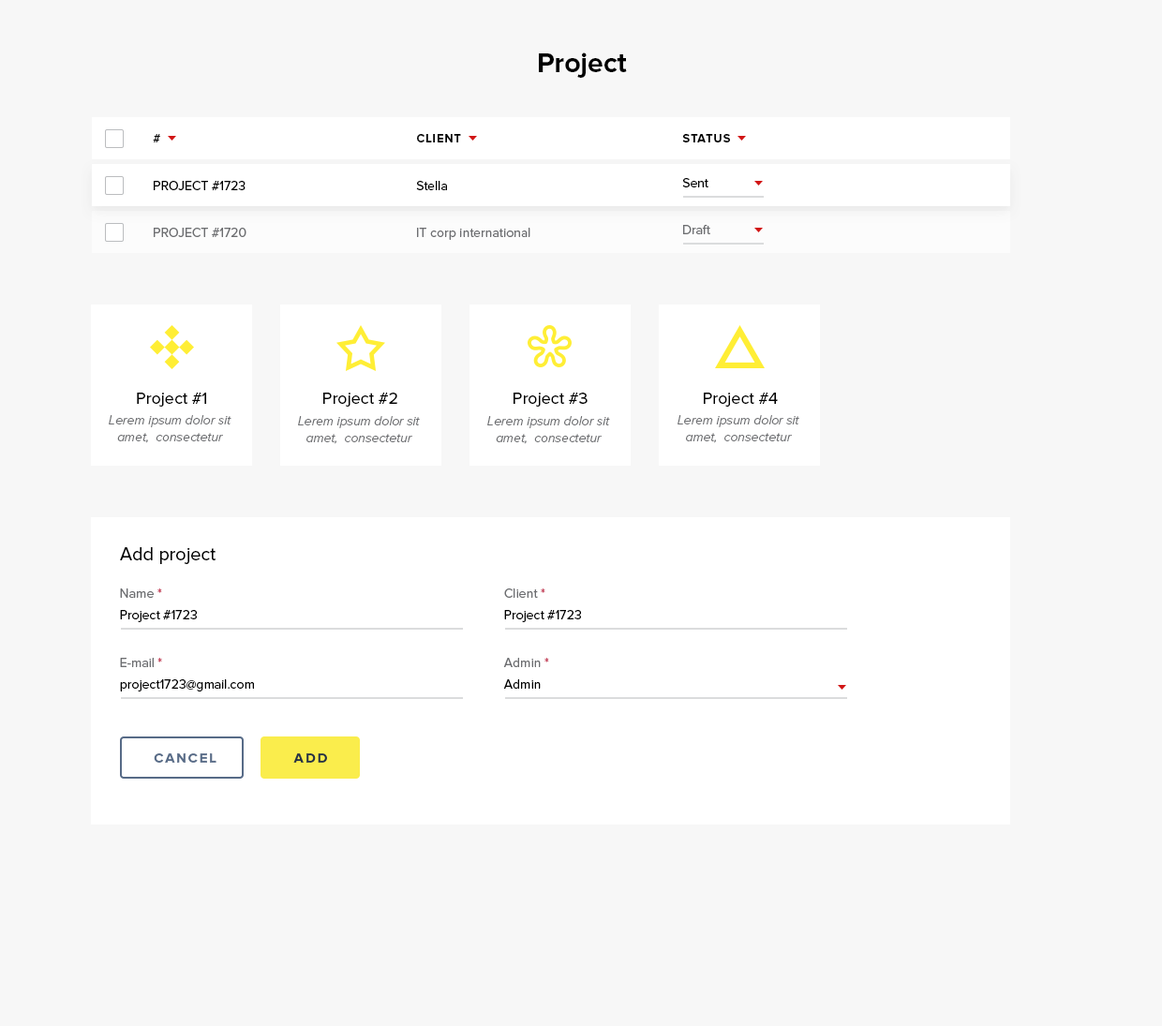
<style>
.page{position:relative;width:1162px;height:1026px;background:#f7f7f7}
.page>*{position:absolute;margin:0}
.t1{font:28.1px "ProximaNova-Bold";color:#000000}
.t2{font:12.2px "ProximaNova-Bold";letter-spacing:0.06em;color:#000000;text-transform:uppercase}
.t3{font:13.1px "ProximaNova-Regular";color:#000000}
.t4{font:13.1px "ProximaNova-Regular";color:#6d6e71}
.t5{font:16.9px "ProximaNova-Regular";color:#000000}
.t6{font:13.1px/16.9px "ProximaNova-LightIt";color:#6d6e71}
.t7{font:18.7px "ProximaNova-Regular";color:#000000}
.t8{font:13.1px "ProximaNova-Regular";color:#c53d58}
.t9{font:14.1px "ProximaNova-Bold";letter-spacing:0.12em;color:#576b87;text-transform:uppercase}
.t10{font:14.1px "ProximaNova-Bold";letter-spacing:0.12em;color:#253244;text-transform:uppercase}
</style>
<div class="page">
<p class="t1" style="left:539px;top:52px;width:88px;height:26px">Project</p>
<p class="t2" style="left:153px;top:134px;width:7px;height:8px">#</p>
<p class="t2" style="left:417px;top:134px;width:44px;height:8px">Client</p>
<p class="t2" style="left:682px;top:134px;width:48px;height:8px">Status</p>
<p class="t3" style="left:154px;top:181px;width:92px;height:9px">PROJECT #1723</p>
<p class="t3" style="left:416px;top:181px;width:31px;height:9px">Stella</p>
<p class="t3" style="left:682px;top:178px;width:26px;height:9px">Sent</p>
<p class="t4" style="left:154px;top:228px;width:92px;height:9px">PROJECT #1720</p>
<p class="t4" style="left:417px;top:228px;width:113px;height:12px">IT corp international</p>
<p class="t4" style="left:683px;top:225px;width:27px;height:9px">Draft</p>
<p class="t5" style="left:137px;top:393px;width:69px;height:14px">Project #1</p>
<p class="t5" style="left:323px;top:393px;width:74px;height:14px">Project #2</p>
<p class="t5" style="left:514px;top:393px;width:74px;height:14px">Project #3</p>
<p class="t5" style="left:704px;top:393px;width:74px;height:14px">Project #4</p>
<p class="t6" style="left:109px;top:415px;width:122px;height:28px;text-align:center">Lerem ipsum dolor sit <br>amet,  consectetur</p>
<p class="t6" style="left:298px;top:416px;width:122px;height:28px;text-align:center">Lerem ipsum dolor sit <br>amet,  consectetur</p>
<p class="t6" style="left:487px;top:416px;width:123px;height:28px;text-align:center">Lerem ipsum dolor sit <br>amet,  consectetur</p>
<p class="t6" style="left:678px;top:415px;width:121px;height:28px;text-align:center">Lerem ipsum dolor sit <br>amet,  consectetur</p>
<p class="t7" style="left:120px;top:547px;width:96px;height:17px">Add project</p>
<p class="t4" style="left:120px;top:589px;width:42px;height:9px">Name <span class="t8">*</span></p>
<p class="t4" style="left:504px;top:589px;width:41px;height:9px">Client <span class="t8">*</span></p>
<p class="t3" style="left:120px;top:610px;width:77px;height:12px">Project #1723</p>
<p class="t3" style="left:504px;top:610px;width:77px;height:12px">Project #1723</p>
<p class="t4" style="left:120px;top:658px;width:42px;height:9px">E-mail <span class="t8">*</span></p>
<p class="t4" style="left:503px;top:658px;width:46px;height:9px">Admin <span class="t8">*</span></p>
<p class="t3" style="left:120px;top:679px;width:134px;height:13px">project1723@gmail.com</p>
<p class="t3" style="left:503px;top:679px;width:38px;height:10px">Admin</p>
<p class="t9" style="left:154px;top:753px;width:62px;height:10px">Cancel</p>
<p class="t10" style="left:293px;top:753px;width:34px;height:10px">Add</p>
</div>
